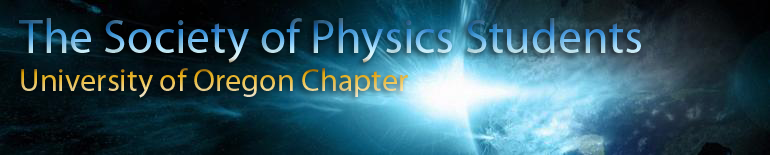
<style>
.page{position:relative;width:770px;height:155px}
.page>*{position:absolute;margin:0}
.t1{font:48px "MyriadPro-Regular"}
.t2{font:32px "MyriadPro-Regular"}
</style>
<div class="page">
<p class="t1" style="left:19px;top:18px;width:622px;height:80px">The Society of Physics Students<br><span class="t2">University of Oregon Chapter</span></p>
</div>
